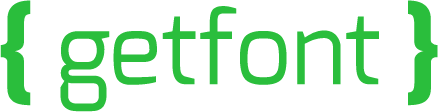
<style>
.page{position:relative;width:438px;height:112px;background:#ffffff}
.page>*{position:absolute;margin:0}
.t1{font:99.3px "Exo-Regular";color:#2abe3c}
.t2{font:99.3px "Exo-ExtraBold";color:#2abe3c}
</style>
<div class="page">
<p class="t1" style="left:0px;top:0px;width:438px;height:112px"><span class="t2">{</span> getfont <span class="t2">}</span></p>
</div>
